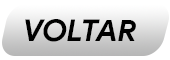
<style>
.page{position:relative;width:170px;height:60px;background:#ffffff}
.page>*{position:absolute;margin:0}
.t1{font:30px "ProductSans-BoldItalic";color:#000000}
</style>
<div class="page">
<p class="t1" style="left:25px;top:19px;width:111px;height:23px">VOLTAR</p>
</div>
